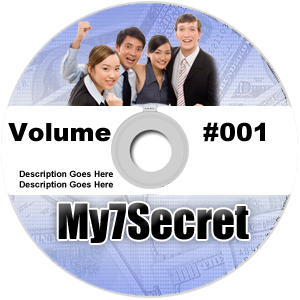
<style>
.page{position:relative;width:300px;height:300px;background:#ffffff}
.page>*{position:absolute;margin:0}
.t1{font:25px "Arial-Black";color:#000000}
.t2{font:8.8px "Arial-BoldMT";color:#000000}
.t3{font:45px "Impact";color:#000000}
</style>
<div class="page">
<p class="t1" style="left:8px;top:122px;width:257px;height:20px">Volume           #001</p>
<p class="t2" style="left:19px;top:170px;width:94px;height:20px">Description Goes Here<br>Description Goes Here</p>
<p class="t3" style="left:58px;top:202px;width:191px;height:41px">My7Secret</p>
</div>
